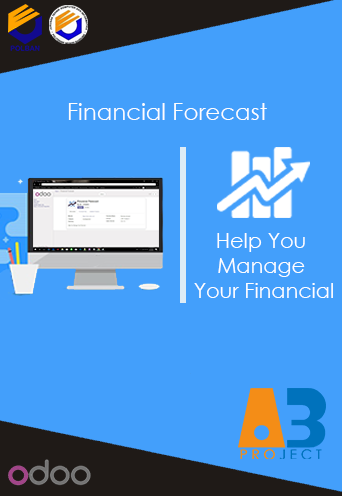
<style>
.page{position:relative;width:342px;height:496px;background:#439ffb}
.page>*{position:absolute;margin:0}
.t1{font:22.9px "CenturyGothic";color:#fefefe}
.t2{font:20.8px "CenturyGothic";color:#ffffff}
</style>
<div class="page">
<p class="t1" style="left:68px;top:103px;width:199px;height:17px">Financial Forecast</p>
<p class="t2" style="left:194px;top:233px;width:139px;height:65px;text-align:center">Help You <br>Manage <br>Your Financial</p>
</div>
